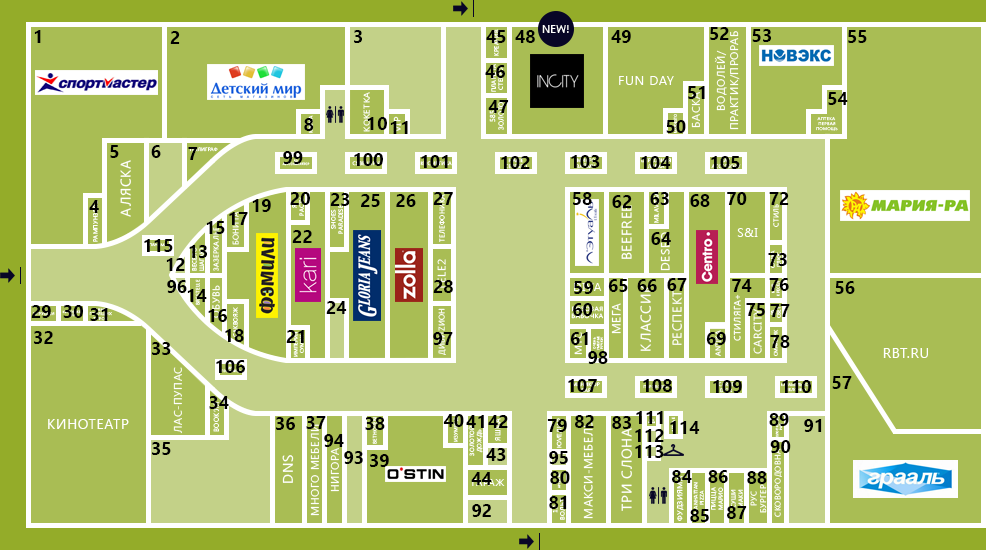
<style>
.page{position:relative;width:986px;height:550px;background:#a9bd54}
.page>*{position:absolute;margin:0}
.t1{font:18px "SegoeUI-Bold";letter-spacing:0.05em;color:#000000;text-transform:uppercase}
.t2{font:18px "SegoeUI-Bold";color:#000000;text-transform:uppercase}
.t3{font:11px "SegoeUI";color:#ffffff;text-transform:uppercase}
</style>
<div class="page">
<p class="t1" style="left:34px;top:30px;width:7px;height:13px">1</p>
<p class="t1" style="left:354px;top:30px;width:8px;height:13px">3</p>
<p class="t2" style="left:486px;top:30px;width:20px;height:13px">45</p>
<p class="t2" style="left:515px;top:30px;width:20px;height:13px">48</p>
<p class="t3" style="left:542px;top:25px;width:27px;height:8px">New!</p>
<p class="t2" style="left:611px;top:30px;width:20px;height:13px">49</p>
<p class="t2" style="left:710px;top:27px;width:19px;height:13px">52</p>
<p class="t2" style="left:752px;top:29px;width:19px;height:13px">53</p>
<p class="t2" style="left:848px;top:30px;width:19px;height:13px">55</p>
<p class="t1" style="left:170px;top:31px;width:10px;height:13px">2</p>
<p class="t2" style="left:485px;top:65px;width:20px;height:13px">46</p>
<p class="t2" style="left:688px;top:86px;width:17px;height:13px">51</p>
<p class="t2" style="left:488px;top:100px;width:21px;height:13px">47</p>
<p class="t2" style="left:828px;top:92px;width:20px;height:13px">54</p>
<p class="t1" style="left:304px;top:118px;width:10px;height:13px">8</p>
<p class="t1" style="left:367px;top:117px;width:20px;height:13px">10</p>
<p class="t1" style="left:390px;top:121px;width:18px;height:13px">11</p>
<p class="t2" style="left:666px;top:120px;width:20px;height:13px">50</p>
<p class="t1" style="left:110px;top:145px;width:9px;height:13px">5</p>
<p class="t1" style="left:151px;top:145px;width:10px;height:13px">6</p>
<p class="t1" style="left:188px;top:147px;width:10px;height:13px">7</p>
<p class="t2" style="left:283px;top:151px;width:20px;height:13px">99</p>
<p class="t2" style="left:354px;top:153px;width:29px;height:13px">100</p>
<p class="t2" style="left:421px;top:155px;width:27px;height:13px">101</p>
<p class="t2" style="left:501px;top:156px;width:29px;height:13px">102</p>
<p class="t2" style="left:571px;top:155px;width:29px;height:13px">103</p>
<p class="t2" style="left:641px;top:156px;width:30px;height:13px">104</p>
<p class="t2" style="left:711px;top:156px;width:29px;height:13px">105</p>
<p class="t2" style="left:290px;top:192px;width:20px;height:13px">20</p>
<p class="t2" style="left:330px;top:193px;width:20px;height:13px">23</p>
<p class="t2" style="left:361px;top:194px;width:19px;height:13px">25</p>
<p class="t2" style="left:396px;top:194px;width:20px;height:13px">26</p>
<p class="t2" style="left:433px;top:192px;width:20px;height:13px">27</p>
<p class="t2" style="left:573px;top:192px;width:19px;height:13px">58</p>
<p class="t2" style="left:612px;top:195px;width:20px;height:13px">62</p>
<p class="t2" style="left:650px;top:192px;width:19px;height:13px">63</p>
<p class="t2" style="left:690px;top:194px;width:20px;height:13px">68</p>
<p class="t2" style="left:727px;top:192px;width:20px;height:13px">70</p>
<p class="t2" style="left:769px;top:192px;width:20px;height:13px">72</p>
<p class="t1" style="left:89px;top:200px;width:10px;height:13px">4</p>
<p class="t2" style="left:252px;top:199px;width:19px;height:13px">19</p>
<p class="t2" style="left:206px;top:221px;width:19px;height:13px">15</p>
<p class="t2" style="left:229px;top:212px;width:19px;height:13px">17</p>
<p class="t2" style="left:292px;top:230px;width:20px;height:13px">22</p>
<p class="t2" style="left:651px;top:232px;width:20px;height:13px">64</p>
<p class="t2" style="left:144px;top:239px;width:29px;height:13px">115</p>
<p class="t2" style="left:189px;top:245px;width:18px;height:13px">13</p>
<p class="t2" style="left:768px;top:253px;width:19px;height:13px">73</p>
<p class="t2" style="left:166px;top:258px;width:19px;height:13px">12</p>
<p class="t2" style="left:167px;top:280px;width:20px;height:13px">96</p>
<p class="t2" style="left:433px;top:280px;width:20px;height:13px">28</p>
<p class="t2" style="left:574px;top:281px;width:20px;height:13px">59</p>
<p class="t2" style="left:608px;top:279px;width:20px;height:13px">65</p>
<p class="t2" style="left:637px;top:279px;width:20px;height:13px">66</p>
<p class="t2" style="left:667px;top:278px;width:20px;height:13px">67</p>
<p class="t2" style="left:732px;top:279px;width:20px;height:13px">74</p>
<p class="t2" style="left:769px;top:278px;width:20px;height:13px">76</p>
<p class="t2" style="left:835px;top:281px;width:20px;height:13px">56</p>
<p class="t2" style="left:187px;top:289px;width:20px;height:13px">14</p>
<p class="t2" style="left:31px;top:305px;width:20px;height:13px">29</p>
<p class="t2" style="left:63px;top:305px;width:20px;height:13px">30</p>
<p class="t2" style="left:326px;top:301px;width:21px;height:13px">24</p>
<p class="t2" style="left:573px;top:303px;width:20px;height:13px">60</p>
<p class="t2" style="left:746px;top:303px;width:19px;height:13px">75</p>
<p class="t2" style="left:770px;top:304px;width:20px;height:13px">77</p>
<p class="t2" style="left:90px;top:308px;width:18px;height:13px">31</p>
<p class="t2" style="left:208px;top:309px;width:19px;height:13px">16</p>
<p class="t2" style="left:225px;top:329px;width:19px;height:13px">18</p>
<p class="t2" style="left:34px;top:331px;width:19px;height:13px">32</p>
<p class="t2" style="left:152px;top:342px;width:19px;height:13px">33</p>
<p class="t2" style="left:286px;top:330px;width:18px;height:13px">21</p>
<p class="t2" style="left:433px;top:332px;width:20px;height:13px">97</p>
<p class="t2" style="left:570px;top:332px;width:18px;height:13px">61</p>
<p class="t2" style="left:706px;top:332px;width:20px;height:13px">69</p>
<p class="t2" style="left:770px;top:335px;width:20px;height:13px">78</p>
<p class="t2" style="left:588px;top:351px;width:20px;height:13px">98</p>
<p class="t2" style="left:216px;top:360px;width:29px;height:13px">106</p>
<p class="t2" style="left:832px;top:376px;width:20px;height:13px">57</p>
<p class="t2" style="left:568px;top:379px;width:29px;height:13px">107</p>
<p class="t2" style="left:643px;top:379px;width:29px;height:13px">108</p>
<p class="t2" style="left:713px;top:380px;width:29px;height:13px">109</p>
<p class="t2" style="left:782px;top:380px;width:29px;height:13px">110</p>
<p class="t2" style="left:209px;top:396px;width:20px;height:13px">34</p>
<p class="t2" style="left:443px;top:414px;width:21px;height:13px">40</p>
<p class="t2" style="left:636px;top:411px;width:27px;height:13px">111</p>
<p class="t2" style="left:769px;top:413px;width:20px;height:13px">89</p>
<p class="t2" style="left:276px;top:417px;width:19px;height:13px">36</p>
<p class="t2" style="left:306px;top:416px;width:20px;height:13px">37</p>
<p class="t2" style="left:365px;top:417px;width:20px;height:13px">38</p>
<p class="t2" style="left:466px;top:415px;width:18px;height:13px">41</p>
<p class="t2" style="left:488px;top:415px;width:20px;height:13px">42</p>
<p class="t2" style="left:547px;top:419px;width:20px;height:13px">79</p>
<p class="t2" style="left:575px;top:415px;width:19px;height:13px">82</p>
<p class="t2" style="left:612px;top:416px;width:19px;height:13px">83</p>
<p class="t2" style="left:670px;top:421px;width:30px;height:13px">114</p>
<p class="t2" style="left:804px;top:419px;width:18px;height:13px">91</p>
<p class="t2" style="left:324px;top:434px;width:20px;height:13px">94</p>
<p class="t2" style="left:635px;top:429px;width:29px;height:13px">112</p>
<p class="t2" style="left:152px;top:442px;width:19px;height:13px">35</p>
<p class="t2" style="left:486px;top:448px;width:20px;height:13px">43</p>
<p class="t2" style="left:635px;top:445px;width:29px;height:13px">113</p>
<p class="t2" style="left:770px;top:440px;width:21px;height:13px">90</p>
<p class="t2" style="left:344px;top:451px;width:19px;height:13px">93</p>
<p class="t2" style="left:370px;top:454px;width:19px;height:13px">39</p>
<p class="t2" style="left:549px;top:451px;width:19px;height:13px">95</p>
<p class="t2" style="left:471px;top:472px;width:21px;height:13px">44</p>
<p class="t2" style="left:550px;top:471px;width:20px;height:13px">80</p>
<p class="t2" style="left:672px;top:470px;width:20px;height:13px">84</p>
<p class="t2" style="left:708px;top:470px;width:20px;height:13px">86</p>
<p class="t2" style="left:747px;top:471px;width:20px;height:13px">88</p>
<p class="t2" style="left:549px;top:496px;width:18px;height:13px">81</p>
<p class="t2" style="left:472px;top:504px;width:19px;height:13px">92</p>
<p class="t2" style="left:690px;top:509px;width:19px;height:13px">85</p>
<p class="t2" style="left:727px;top:506px;width:20px;height:13px">87</p>
</div>
